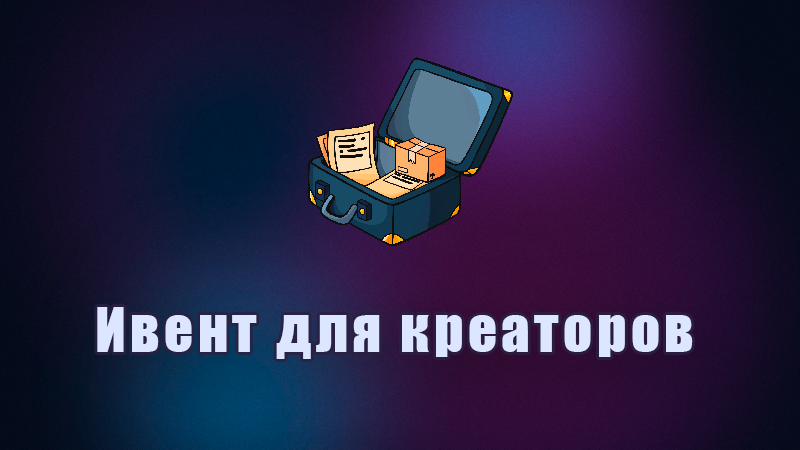
<style>
.page{position:relative;width:800px;height:450px}
.page>*{position:absolute;margin:0}
.t1{font:56.7px "Impact";letter-spacing:0.08em;color:#dde6ff}
</style>
<div class="page">
<p class="t1" style="left:97px;top:307px;width:596px;height:52px">Ивент для креаторов</p>
</div>
